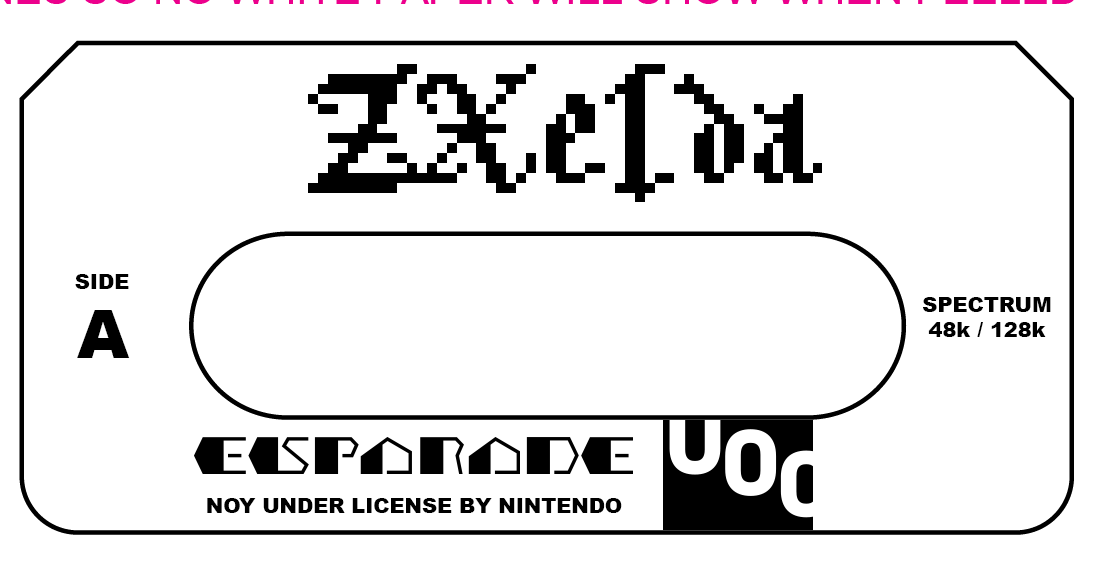
<style>
.page{position:relative;width:1116px;height:564px;background:#ffffff}
.page>*{position:absolute;margin:0}
.t1{font:20.8px "Arial-Black";color:#000000}
.t2{font:66.7px "Arial-Black";color:#000000}
</style>
<div class="page">
<p class="t1" style="left:75px;top:274px;width:54px;height:15px">SIDE</p>
<p class="t1" style="left:923px;top:297px;width:128px;height:40px;text-align:center">SPECTRUM<br>48k / 128k</p>
<p class="t2" style="left:77px;top:310px;width:53px;height:48px">A</p>
<p class="t1" style="left:207px;top:498px;width:415px;height:15px">NOY UNDER LICENSE BY NINTENDO</p>
</div>
